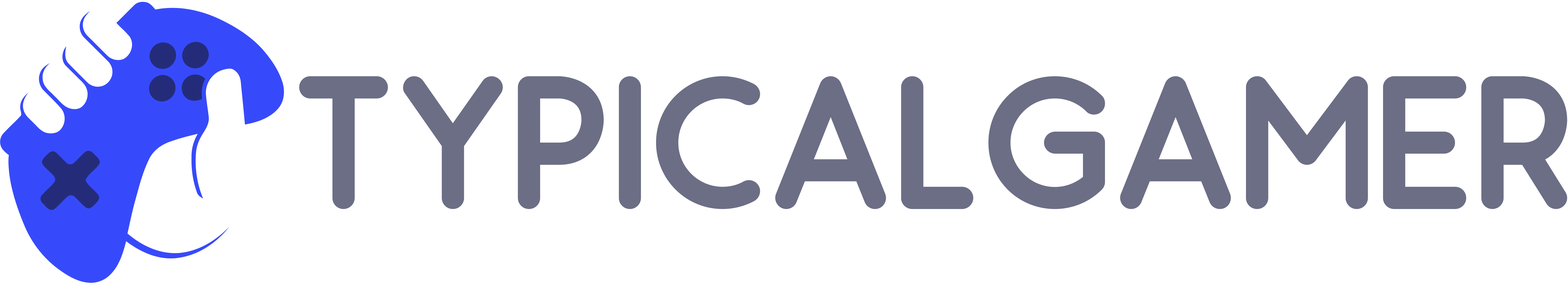
<style>
.page{position:relative;width:1568px;height:286px;background:#ffffff}
.page>*{position:absolute;margin:0}
.t1{font:189.8px "Odin-Bold";color:#6c6e86;text-transform:uppercase}
</style>
<div class="page">
<p class="t1" style="left:299px;top:76px;width:1268px;height:133px">TypicalGamer</p>
</div>
